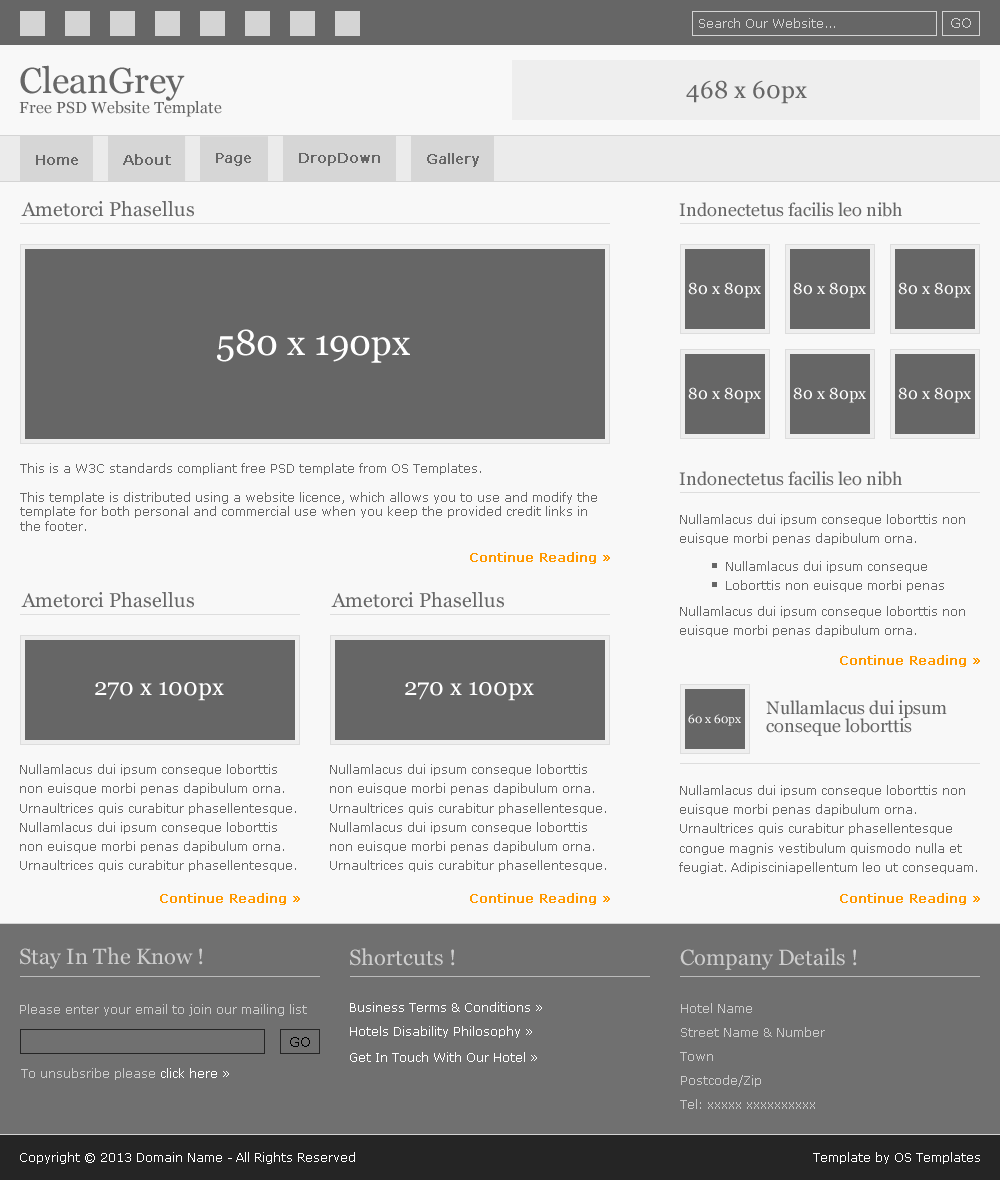
<style>
.page{position:relative;width:1000px;height:1180px;background:#f8f8f8}
.page>*{position:absolute;margin:0}
.t1{font:12px "Verdana";color:#d4d4d4}
.t2{font:14px "Verdana";color:#d4d4d4}
.t3{font:36px "Georgia";color:#666666}
.t4{font:24px "Georgia";color:#666666}
.t5{font:16px "Georgia";color:#666666}
.t6{font:14px "Verdana";color:#666666;font-weight:bold}
.t7{font:20px "Georgia";color:#666666}
.t8{font:18px "Georgia";color:#666666}
.t9{font:16px "Georgia";color:#ffffff}
.t10{font:36px "Georgia";color:#ffffff}
.t11{font:12px/14.4px "Verdana";color:#666666}
.t12{font:12px/19.2px "Verdana";color:#666666}
.t13{font:12px "Verdana";color:#ff9900;font-weight:bold}
.t14{font:24px "Georgia";color:#ffffff}
.t15{font:18px/18px "Georgia";color:#666666}
.t16{font:12px "Georgia";color:#ffffff}
.t17{font:22px "Georgia";color:#cccccc}
.t18{font:12px "Verdana";color:#cccccc}
.t19{font:12px "Verdana";color:#ffffff}
.t20{font:12px/24px "Verdana";color:#cccccc}
.t21{font:14px "Verdana";color:#000000}
</style>
<div class="page">
<p class="t1" style="left:699px;top:18px;width:136px;height:10px">Search Our Website...</p>
<p class="t2" style="left:951px;top:18px;width:20px;height:10px">GO</p>
<p class="t3" style="left:20px;top:65px;width:165px;height:36px">CleanGrey</p>
<p class="t4" style="left:686px;top:80px;width:121px;height:24px">468 x 60px</p>
<p class="t5" style="left:19px;top:101px;width:203px;height:16px">Free PSD Website Template</p>
<p class="t6" style="left:36px;top:155px;width:42px;height:10px">Home</p>
<p class="t6" style="left:123px;top:154px;width:48px;height:11px">About</p>
<p class="t6" style="left:216px;top:153px;width:35px;height:13px">Page</p>
<p class="t6" style="left:299px;top:153px;width:81px;height:13px">DropDown</p>
<p class="t6" style="left:427px;top:153px;width:52px;height:14px">Gallery</p>
<p class="t7" style="left:21px;top:201px;width:173px;height:16px">Ametorci Phasellus</p>
<p class="t8" style="left:679px;top:202px;width:223px;height:15px">Indonectetus facilis leo nibh</p>
<p class="t9" style="left:688px;top:282px;width:73px;height:16px">80 x 80px</p>
<p class="t9" style="left:793px;top:282px;width:73px;height:16px">80 x 80px</p>
<p class="t9" style="left:898px;top:282px;width:73px;height:16px">80 x 80px</p>
<p class="t10" style="left:217px;top:329px;width:193px;height:34px">580 x 190px</p>
<p class="t9" style="left:688px;top:387px;width:73px;height:16px">80 x 80px</p>
<p class="t9" style="left:793px;top:387px;width:73px;height:16px">80 x 80px</p>
<p class="t9" style="left:898px;top:387px;width:73px;height:16px">80 x 80px</p>
<p class="t11" style="left:20px;top:463px;width:577px;height:68px">This is a W3C standards compliant free PSD template from OS Templates. <br><br>This template is distributed using a website licence, which allows you to use and modify the template for both personal and commercial use when you keep the provided credit links in the footer.</p>
<p class="t8" style="left:679px;top:471px;width:223px;height:15px">Indonectetus facilis leo nibh</p>
<p class="t12" style="left:680px;top:514px;width:285px;height:31px">Nullamlacus dui ipsum conseque loborttis non <br>euisque morbi penas dapibulum orna.</p>
<p class="t13" style="left:470px;top:552px;width:140px;height:12px">Continue Reading »</p>
<p class="t12" style="left:726px;top:561px;width:218px;height:31px">Nullamlacus dui ipsum conseque <br>Loborttis non euisque morbi penas</p>
<p class="t7" style="left:21px;top:592px;width:173px;height:16px">Ametorci Phasellus</p>
<p class="t7" style="left:331px;top:592px;width:173px;height:16px">Ametorci Phasellus</p>
<p class="t12" style="left:680px;top:606px;width:285px;height:31px">Nullamlacus dui ipsum conseque loborttis non <br>euisque morbi penas dapibulum orna.</p>
<p class="t13" style="left:840px;top:655px;width:140px;height:12px">Continue Reading »</p>
<p class="t14" style="left:95px;top:682px;width:129px;height:19px">270 x 100px</p>
<p class="t14" style="left:405px;top:682px;width:129px;height:19px">270 x 100px</p>
<p class="t15" style="left:766px;top:700px;width:181px;height:36px">Nullamlacus dui ipsum <br>conseque loborttis</p>
<p class="t16" style="left:688px;top:714px;width:53px;height:12px">60 x 60px</p>
<p class="t12" style="left:20px;top:764px;width:276px;height:108px">Nullamlacus dui ipsum conseque loborttis non euisque morbi penas dapibulum orna. <br>Urnaultrices quis curabitur phasellentesque.<br>Nullamlacus dui ipsum conseque loborttis non euisque morbi penas dapibulum orna. <br>Urnaultrices quis curabitur phasellentesque.</p>
<p class="t12" style="left:330px;top:764px;width:276px;height:108px">Nullamlacus dui ipsum conseque loborttis non euisque morbi penas dapibulum orna. <br>Urnaultrices quis curabitur phasellentesque.<br>Nullamlacus dui ipsum conseque loborttis non euisque morbi penas dapibulum orna. <br>Urnaultrices quis curabitur phasellentesque.</p>
<p class="t12" style="left:679px;top:785px;width:298px;height:89px">Nullamlacus dui ipsum conseque loborttis non <br>euisque morbi penas dapibulum orna. <br>Urnaultrices quis curabitur phasellentesque <br>congue magnis vestibulum quismodo nulla et <br>feugiat. Adipisciniapellentum leo ut consequam.</p>
<p class="t13" style="left:160px;top:893px;width:140px;height:12px">Continue Reading »</p>
<p class="t13" style="left:470px;top:893px;width:140px;height:12px">Continue Reading »</p>
<p class="t13" style="left:840px;top:893px;width:140px;height:12px">Continue Reading »</p>
<p class="t17" style="left:20px;top:947px;width:183px;height:22px">Stay In The Know !</p>
<p class="t17" style="left:350px;top:948px;width:105px;height:18px">Shortcuts !</p>
<p class="t17" style="left:680px;top:948px;width:177px;height:22px">Company Details !</p>
<p class="t18" style="left:20px;top:1004px;width:287px;height:12px">Please enter your email to join our mailing list</p>
<p class="t19" style="left:350px;top:1002px;width:192px;height:10px">Business Terms &amp; Conditions »</p>
<p class="t20" style="left:680px;top:1003px;width:145px;height:106px">Hotel Name<br>Street Name &amp; Number<br>Town<br>Postcode/Zip<br>Tel: xxxxx xxxxxxxxxx</p>
<p class="t21" style="left:290px;top:1037px;width:20px;height:10px">GO</p>
<p class="t19" style="left:350px;top:1026px;width:182px;height:12px">Hotels Disability Philosophy »</p>
<p class="t19" style="left:350px;top:1052px;width:187px;height:10px">Get In Touch With Our Hotel »</p>
<p class="t18" style="left:21px;top:1068px;width:208px;height:12px">To unsubsribe please <span class="t19">click here »</span></p>
<p class="t19" style="left:20px;top:1152px;width:335px;height:12px">Copyright © 2013 Domain Name - All Rights Reserved</p>
<p class="t19" style="left:813px;top:1152px;width:167px;height:12px">Template by OS Templates</p>
</div>
